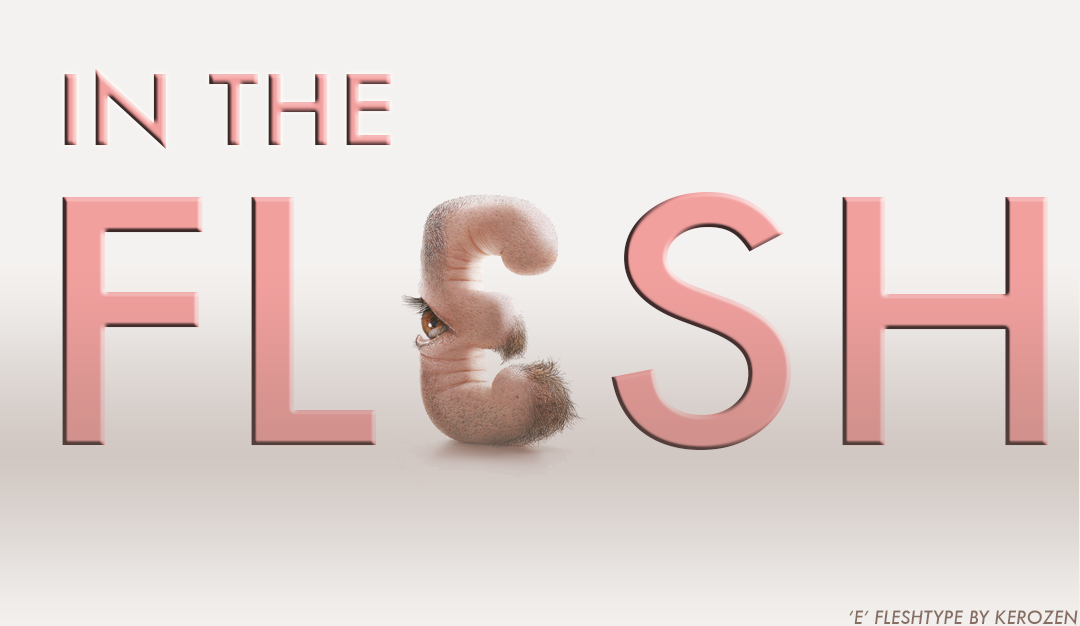
<style>
.page{position:relative;width:1080px;height:626px;background:#f4f2f0}
.page>*{position:absolute;margin:0}
.t1{font:94.1px "Futura-Medium";scale:1.13 1}
.t2{font:329.3px "Futura-Medium";scale:1.13 1}
.t3{font:18px "Futura-MediumItalic";color:#876e63}
</style>
<div class="page">
<p class="t1" style="left:64px;top:69px;width:327px;height:80px">IN THE</p>
<p class="t2" style="left:62px;top:192px;width:986px;height:258px">FLESH</p>
<p class="t3" style="left:849px;top:609px;width:229px;height:16px">‘E’ FLESHTYPE BY KEROZEN</p>
</div>
